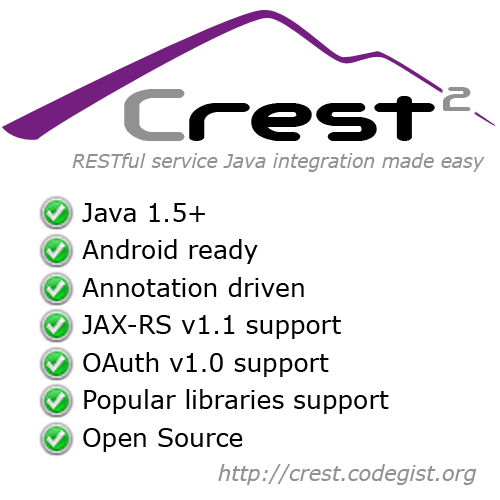
<style>
.page{position:relative;width:500px;height:500px;background:#ffffff}
.page>*{position:absolute;margin:0}
.t1{font:75.2px "AutomaticaBRK";color:#010101}
.t2{font:75.2px "AutomaticaBRK";color:#919191}
.t3{font:33.9px "AutomaticaBRK";color:#919191}
.t4{font:18.8px "Verdana-Italic";color:#919191}
.t5{font:25px/37.5px "Verdana";color:#000000}
.t6{font:20.8px "Verdana-Italic";color:#919191}
</style>
<div class="page">
<p class="t1" style="left:124px;top:89px;width:311px;height:52px"><span class="t2">C</span>rest</p>
<p class="t3" style="left:443px;top:87px;width:28px;height:24px">2</p>
<p class="t4" style="left:72px;top:153px;width:413px;height:19px">RESTful service Java integration made easy</p>
<p class="t5" style="left:82px;top:203px;width:307px;height:249px">Java 1.5+<br>Android ready<br>Annotation driven<br>JAX-RS v1.1 support<br>OAuth v1.0 support<br>Popular libraries support<br>Open Source</p>
<p class="t6" style="left:218px;top:464px;width:259px;height:21px">http://crest.codegist.org</p>
</div>
